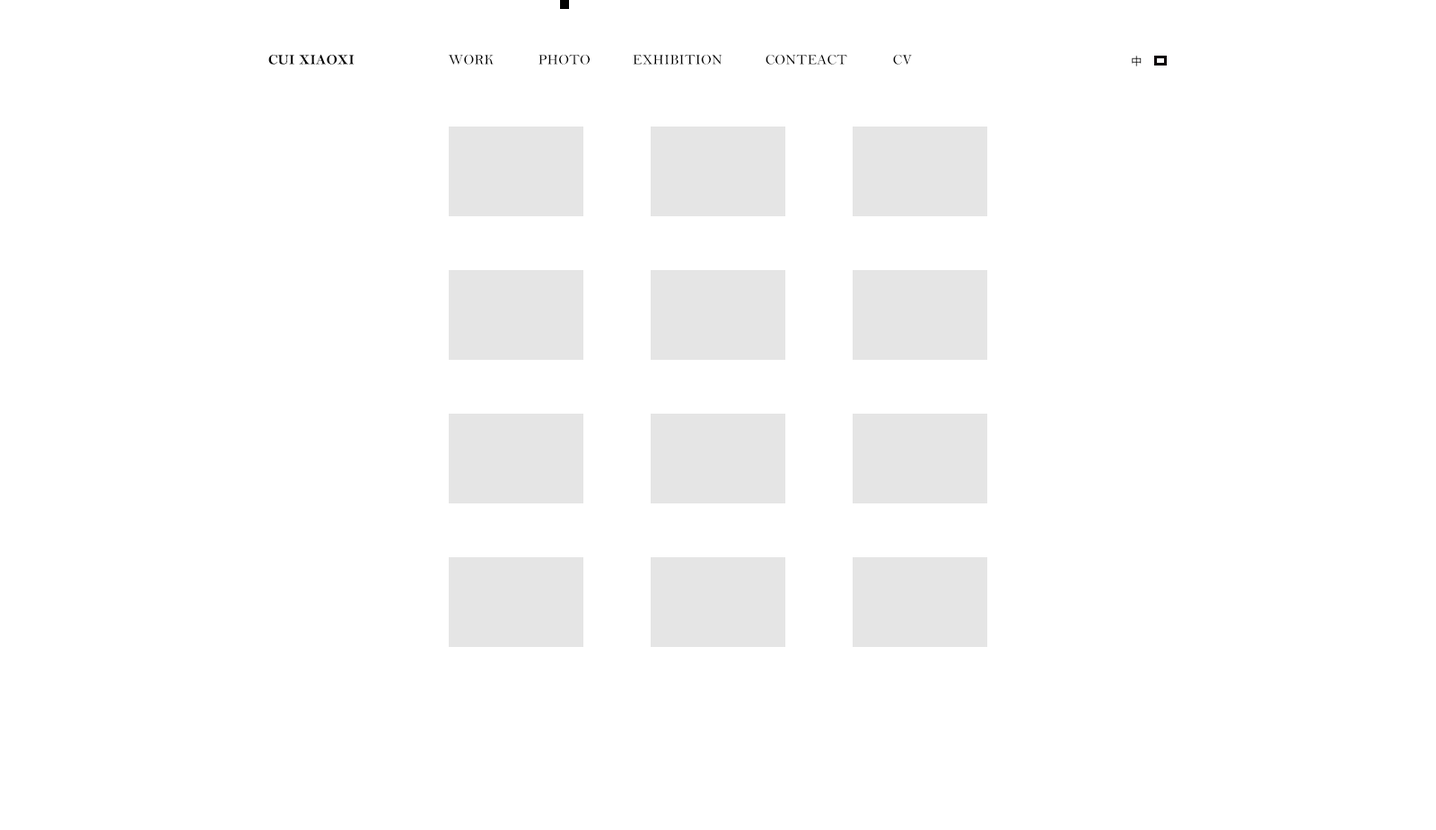
<style>
.page{position:relative;width:1436px;height:830px;background:#ffffff}
.page>*{position:absolute;margin:0}
.t1{font:14.4px "BellMTBold";letter-spacing:0.02em;color:#000000;text-transform:uppercase}
.t2{font:14.4px "BellMT";letter-spacing:0.02em;color:#000000;text-transform:uppercase}
.t3{font:10.8px "MicrosoftYaHei";letter-spacing:0.02em;text-transform:uppercase}
</style>
<div class="page">
<p class="t1" style="left:268px;top:55px;width:87px;height:10px">cui xiaoxi</p>
<p class="t2" style="left:448px;top:55px;width:46px;height:10px">work</p>
<p class="t2" style="left:539px;top:55px;width:51px;height:10px">photo</p>
<p class="t2" style="left:633px;top:55px;width:90px;height:10px">exhibition</p>
<p class="t2" style="left:766px;top:55px;width:81px;height:10px">conteact</p>
<p class="t2" style="left:893px;top:55px;width:19px;height:10px">cv</p>
<p class="t3" style="left:1132px;top:56px;width:10px;height:10px">中</p>
</div>
